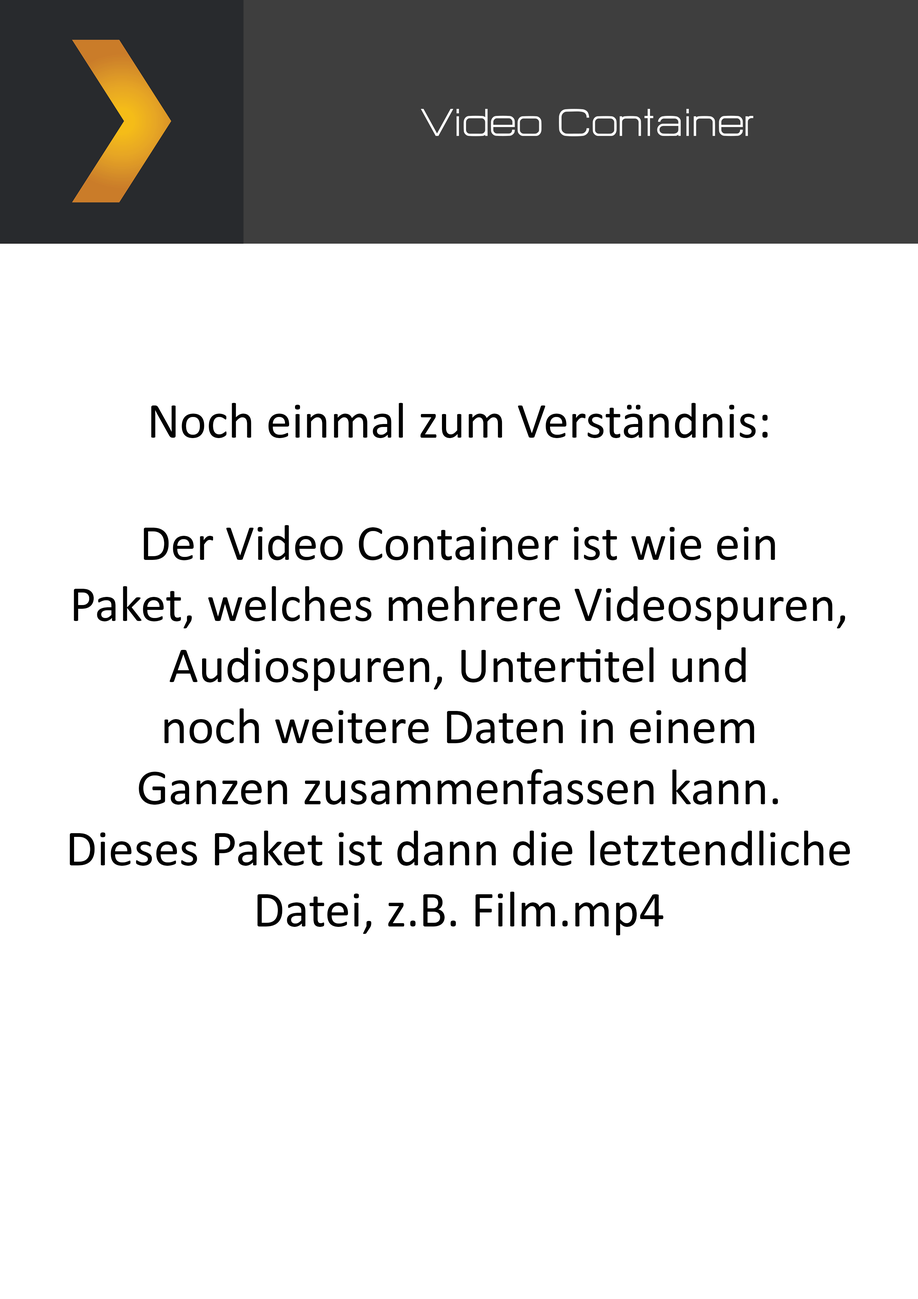
<style>
.page{position:relative;width:918px;height:1299px;background:#ffffff}
.page>*{position:absolute;margin:0}
.t1{font:47.8px "HURTMOLDPersonalUse-Regular";color:#ffffff}
.t2{font:50.9px "Calibri";color:#000000}
</style>
<div class="page">
<p class="t1" style="left:421px;top:109px;width:332px;height:27px">Video Container</p>
<p class="t2" style="left:70px;top:403px;width:780px;height:532px;text-align:center">Noch einmal zum Verständnis:<br><br>Der Video Container ist wie ein<br>Paket, welches mehrere Videospuren,<br>Audiospuren, Untertitel und<br>noch weitere Daten in einem<br>Ganzen zusammenfassen kann.<br>Dieses Paket ist dann die letztendliche<br>Datei, z.B. Film.mp4</p>
</div>
